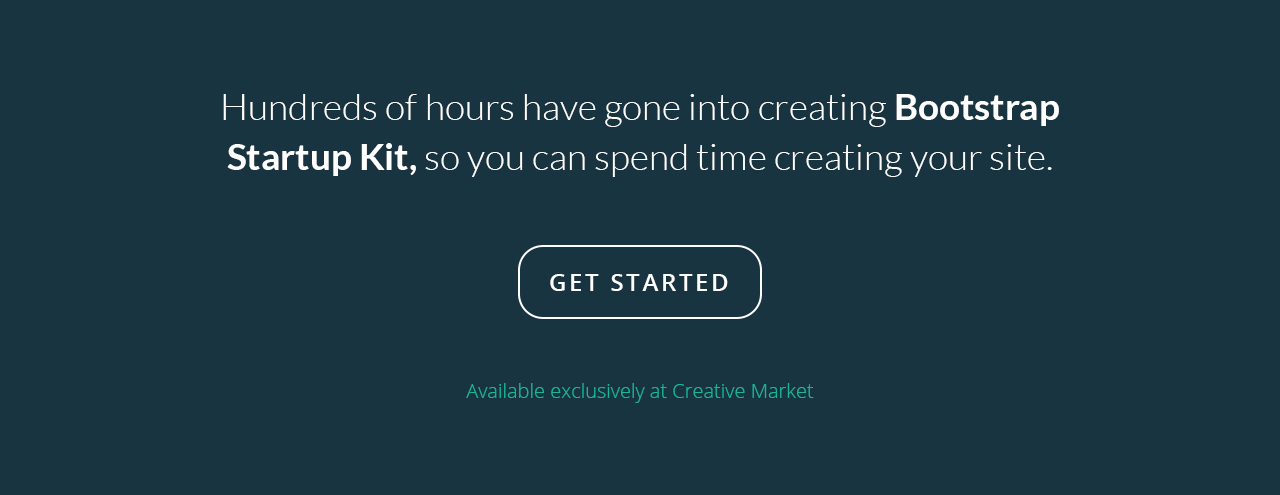
<style>
.page{position:relative;width:1280px;height:495px;background:#193441}
.page>*{position:absolute;margin:0}
.t1{font:37px/50px "Lato-Light";color:#ffffff}
.t2{font:37px/50px "Lato-Bold";color:#ffffff}
.t3{font:24px "OpenSans-Semibold";letter-spacing:0.11em;color:#ffffff}
.t4{font:20px "OpenSans-Light";color:#19b799}
</style>
<div class="page">
<p class="t1" style="left:223px;top:94px;width:836px;height:83px;text-align:center">Hundreds of hours have gone into creating <span class="t2">Bootstrap Startup Kit,</span> so you can spend time creating your site.</p>
<p class="t3" style="left:550px;top:274px;width:178px;height:17px">GET STARTED</p>
<p class="t4" style="left:466px;top:383px;width:348px;height:20px">Available exclusively at Creative Market</p>
</div>
